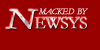
<style>
.page{position:relative;width:100px;height:50px;background:#990000}
.page>*{position:absolute;margin:0}
.t1{font:24px "Garamond";letter-spacing:-0.025em;font-variant:small-caps;font-weight:bold}
.t2{font:28.8px "Garamond-Italic";letter-spacing:-0.025em;font-variant:small-caps;font-weight:bold;scale:1.25 1}
.t3{font:12px "Garamond-Italic";letter-spacing:-0.025em;font-variant:small-caps;font-weight:bold}
</style>
<div class="page">
<p class="t1" style="left:5px;top:9px;width:82px;height:20px"><span class="t2">N</span>ewsys</p>
<p class="t3" style="left:38px;top:8px;width:50px;height:7px">macked by</p>
</div>
